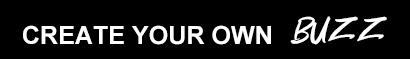
<style>
.page{position:relative;width:410px;height:59px;background:#000000}
.page>*{position:absolute;margin:0}
.t1{font:25px "Arial-BoldMT";letter-spacing:0.002em;color:#ffffff}
.t2{font:37.5px "Oh-Now!";letter-spacing:0.002em;color:#ffffff}
</style>
<div class="page">
<p class="t1" style="left:23px;top:16px;width:364px;height:29px">CREATE YOUR OWN   <span class="t2">BUZZ</span></p>
</div>
